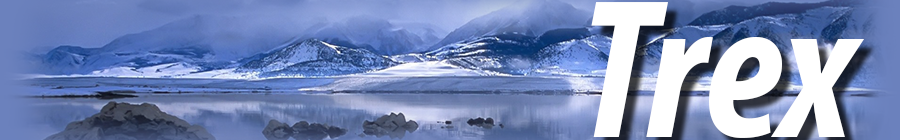
<style>
.page{position:relative;width:900px;height:140px}
.page>*{position:absolute;margin:0}
.t1{font:200px "MyriadPro-BoldCondIt";color:#ffffff}
</style>
<div class="page">
<p class="t1" style="left:591px;top:2px;width:273px;height:136px">Trex</p>
</div>
